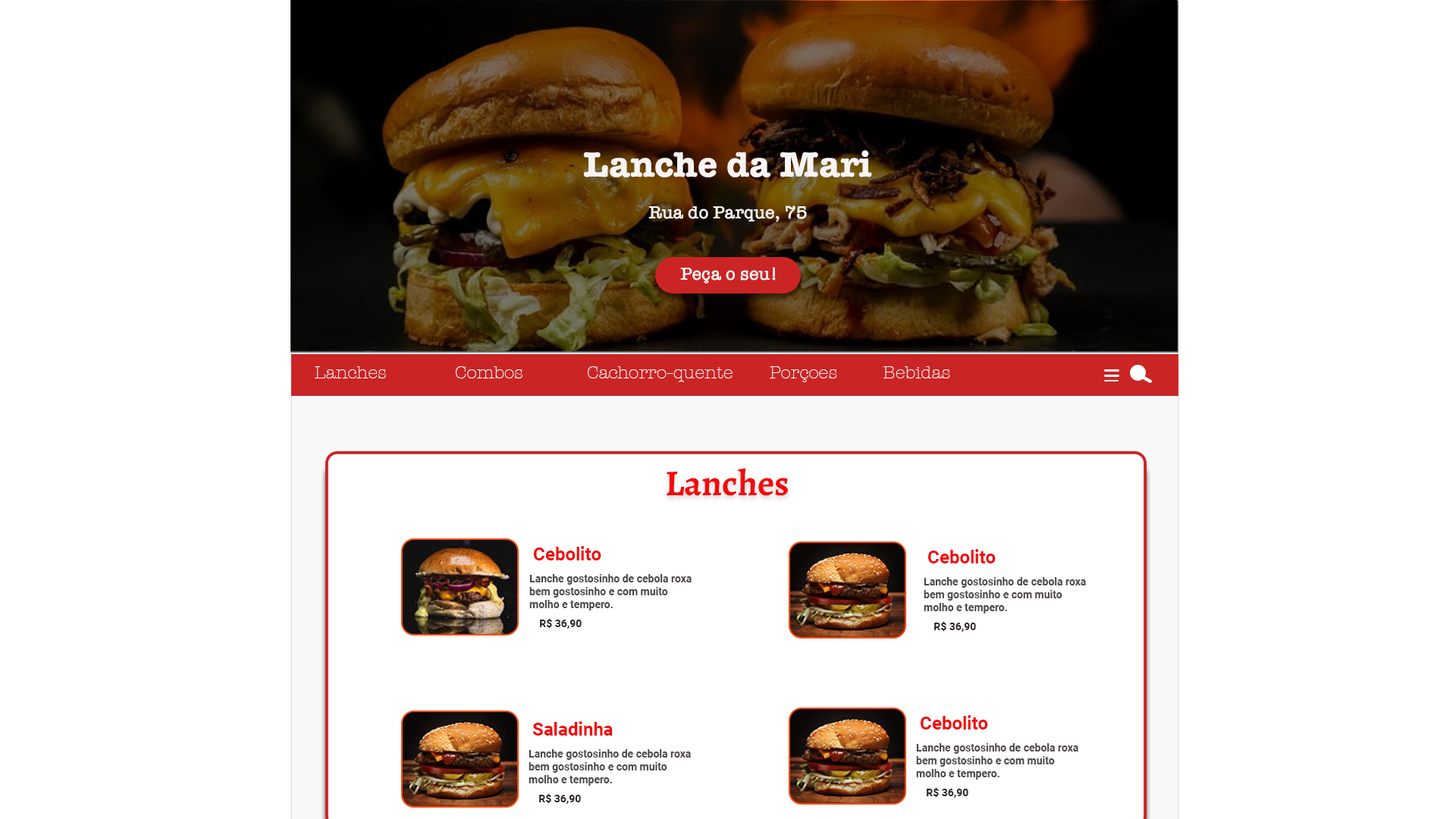
<style>
.page{position:relative;width:1456px;height:819px;background:#ffffff}
.page>*{position:absolute;margin:0}
.t1{font:36.4px "AmericanTypewriter-Bold";color:#f9f4f4}
.t2{font:18.2px "AmericanTypewriter-Semibold";color:#f9f4f4}
.t3{font:18.2px "AmericanTypewriter-Light";color:#f9f4f4}
.t4{font:36.4px "Alegreya-Bold";color:#f30a0a}
.t5{font:18.2px "Roboto-Bold";color:#f30a0a}
.t6{font:10.6px "Roboto-Bold";color:#4f4848}
.t7{font:10.6px "Roboto-Bold";color:#2f2828}
</style>
<div class="page">
<p class="t1" style="left:583px;top:150px;width:289px;height:27px">Lanche da Mari</p>
<p class="t2" style="left:648px;top:206px;width:159px;height:16px">Rua do Parque, 75</p>
<p class="t2" style="left:680px;top:267px;width:96px;height:17px">Peça o seu!</p>
<p class="t3" style="left:315px;top:366px;width:635px;height:16px">Lanches               Combos              Cachorro-quente        Porçoes          Bebidas</p>
<p class="t4" style="left:667px;top:468px;width:121px;height:28px">Lanches</p>
<p class="t5" style="left:534px;top:546px;width:67px;height:14px">Cebolito</p>
<p class="t5" style="left:928px;top:549px;width:68px;height:14px">Cebolito</p>
<p class="t6" style="left:529px;top:574px;width:163px;height:36px">Lanche gostosinho de cebola roxa<br>bem gostosinho e com muito <br>molho e tempero.</p>
<p class="t6" style="left:924px;top:577px;width:162px;height:36px">Lanche gostosinho de cebola roxa<br>bem gostosinho e com muito <br>molho e tempero.</p>
<p class="t7" style="left:540px;top:618px;width:42px;height:11px">R$ 36,90</p>
<p class="t7" style="left:934px;top:621px;width:42px;height:11px">R$ 36,90</p>
<p class="t5" style="left:532px;top:721px;width:81px;height:15px">Saladinha</p>
<p class="t5" style="left:921px;top:715px;width:67px;height:15px">Cebolito</p>
<p class="t6" style="left:529px;top:749px;width:162px;height:37px">Lanche gostosinho de cebola roxa<br>bem gostosinho e com muito <br>molho e tempero.</p>
<p class="t6" style="left:916px;top:743px;width:162px;height:37px">Lanche gostosinho de cebola roxa<br>bem gostosinho e com muito <br>molho e tempero.</p>
<p class="t7" style="left:539px;top:793px;width:42px;height:11px">R$ 36,90</p>
<p class="t7" style="left:927px;top:787px;width:41px;height:11px">R$ 36,90</p>
</div>
